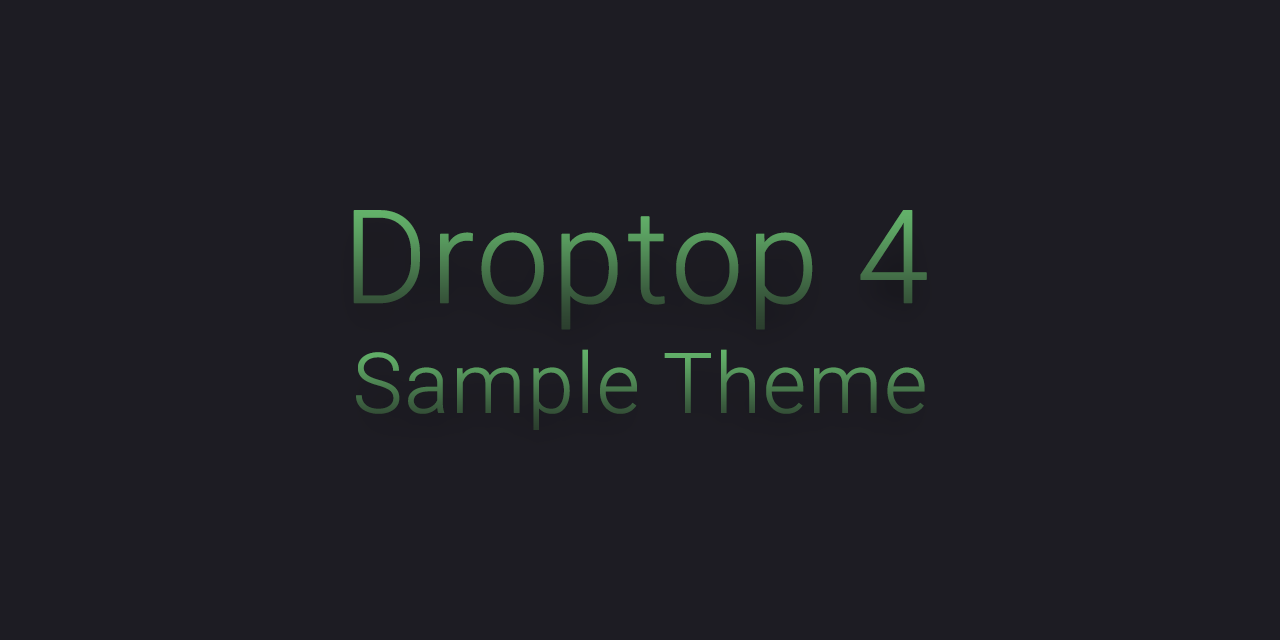
<style>
.page{position:relative;width:1280px;height:640px;background:#1d1c23}
.page>*{position:absolute;margin:0}
.t1{font:129.2px "Roboto-Light";font-weight:bold}
.t2{font:83.3px "Roboto-Light";font-weight:bold}
</style>
<div class="page">
<p class="t1" style="left:353px;top:210px;width:574px;height:120px">Droptop 4</p>
<p class="t2" style="left:356px;top:349px;width:569px;height:81px">Sample Theme</p>
</div>
